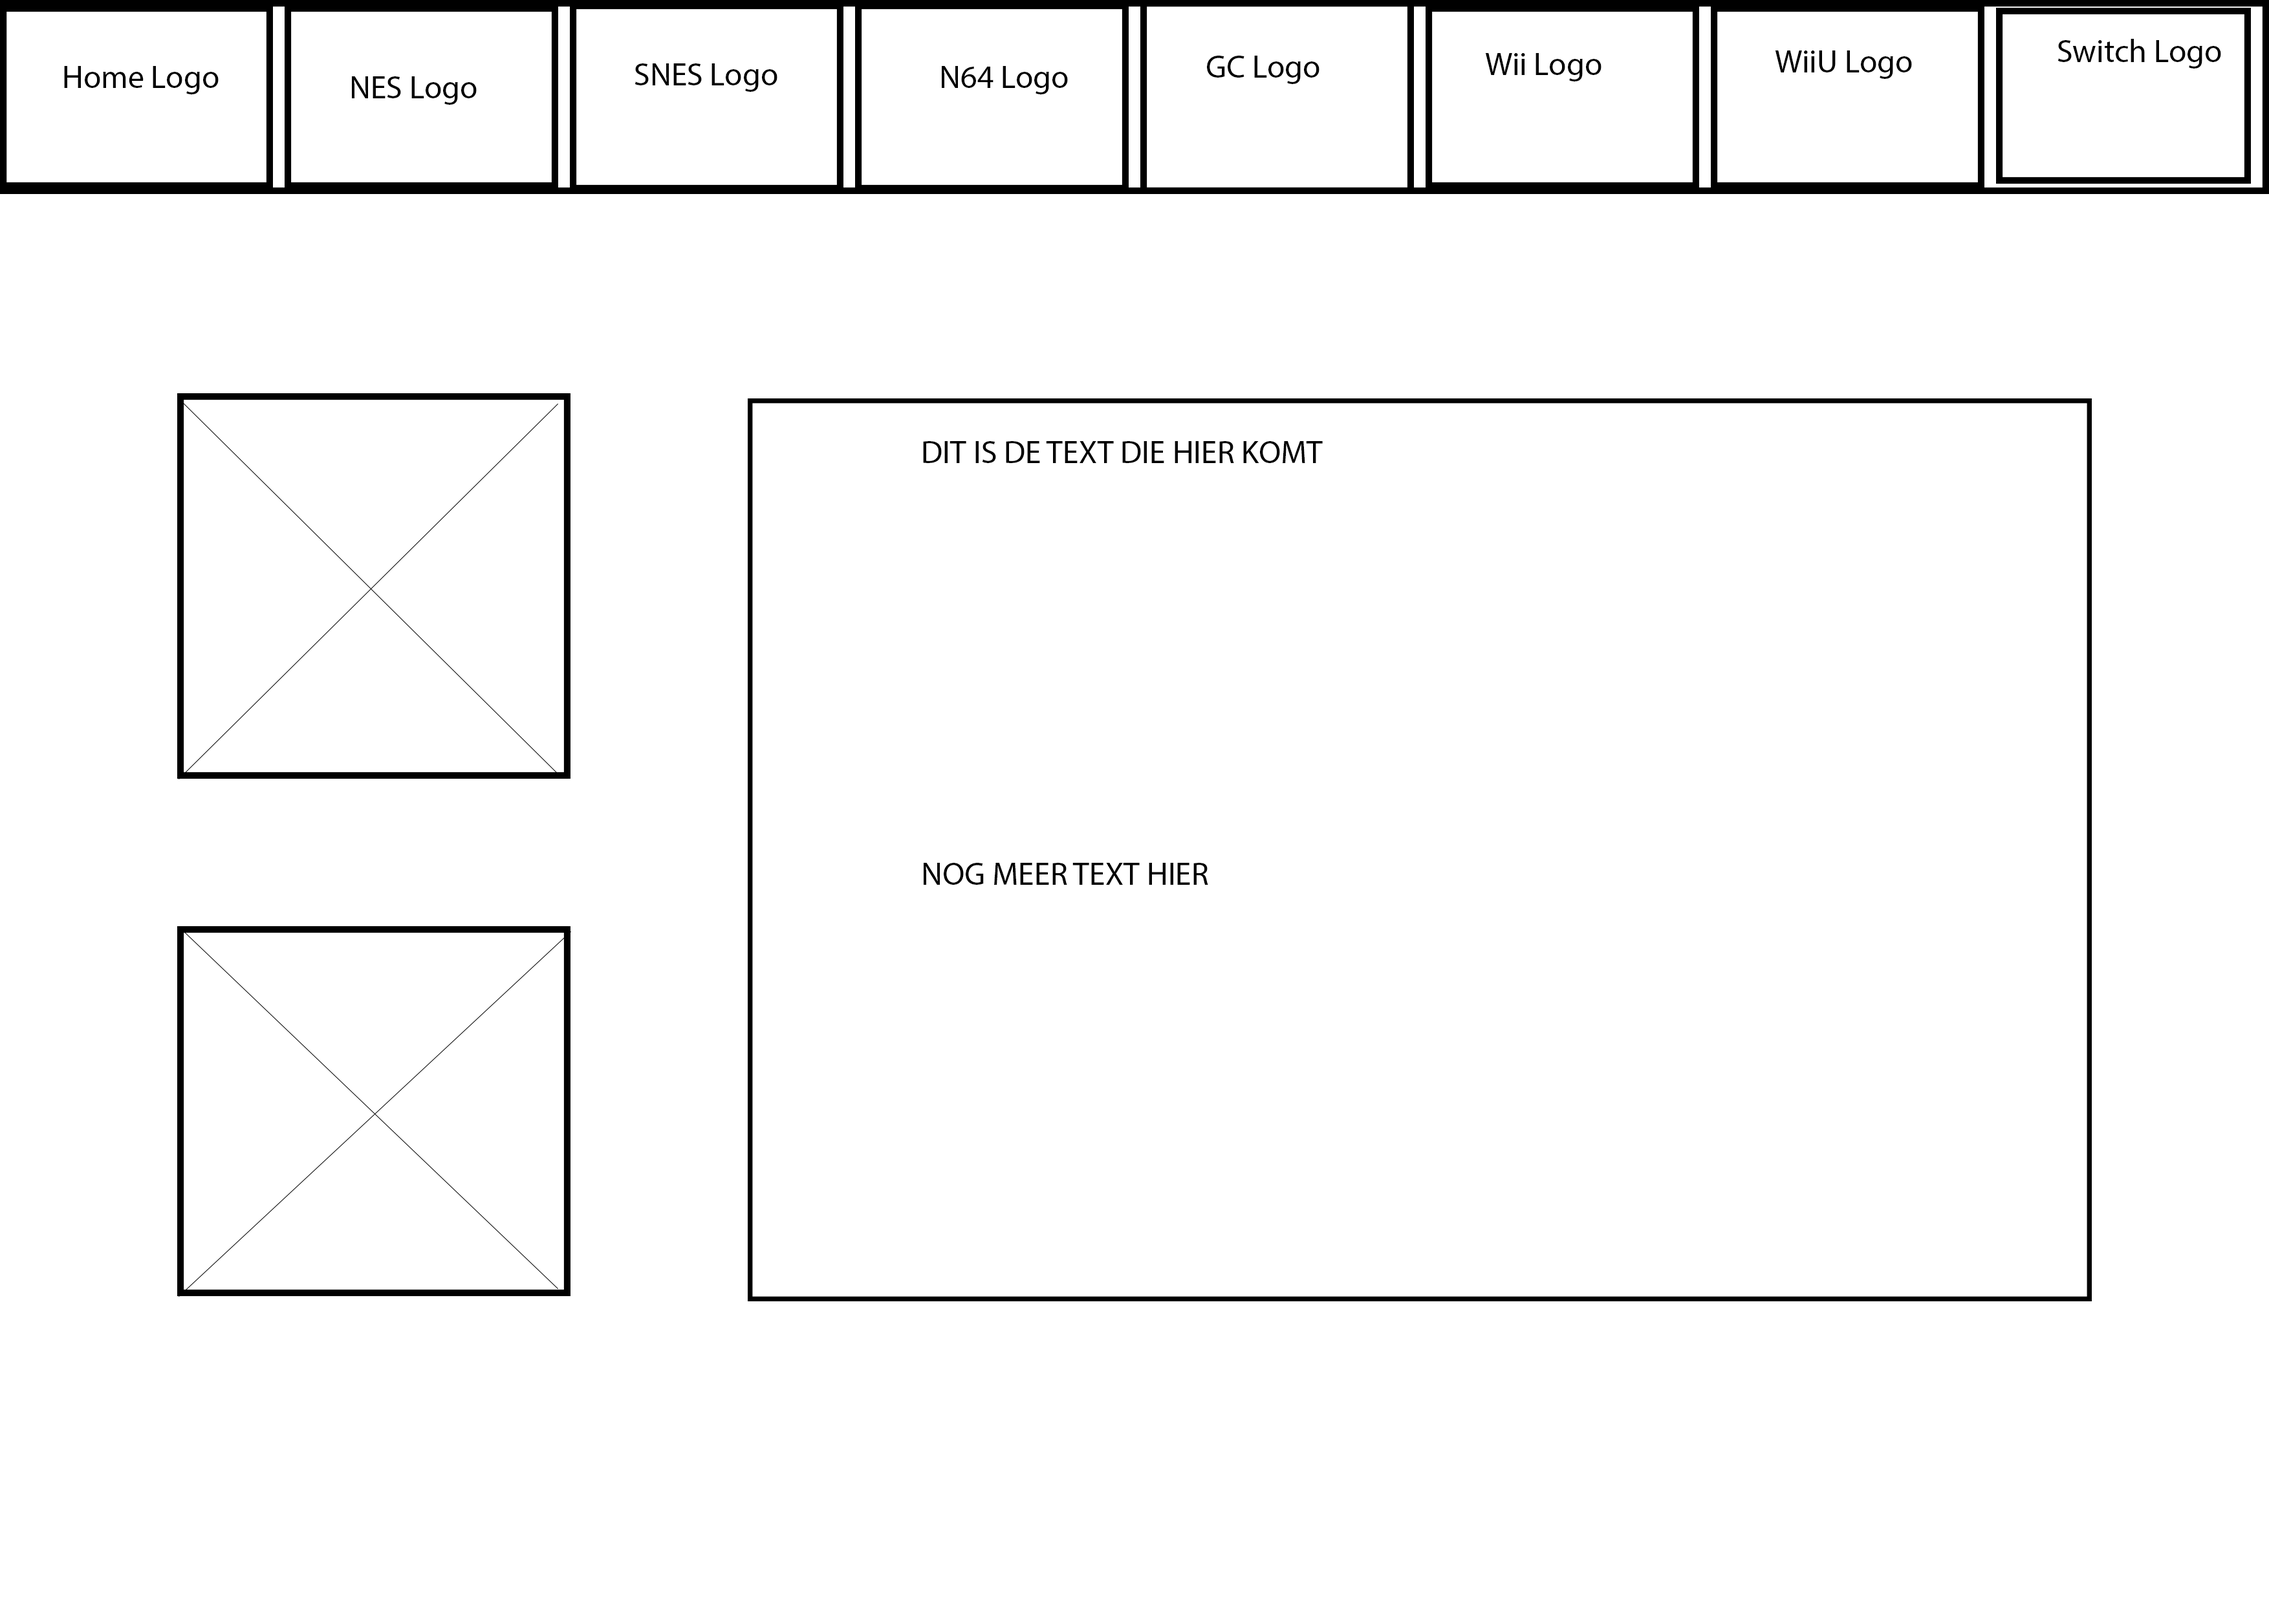
<style>
.page{position:relative;width:2269px;height:1604px;background:#ffffff}
.page>*{position:absolute;margin:0}
.t1{font:7.8px "MyriadPro-Regular";color:#000000}
</style>
<div class="page">
<p class="t1" style="left:2057px;top:39px;width:164px;height:30px">Switch Logo</p>
<p class="t1" style="left:1485px;top:53px;width:116px;height:28px">Wii Logo</p>
<p class="t1" style="left:1774px;top:50px;width:138px;height:29px">WiiU Logo</p>
<p class="t1" style="left:64px;top:66px;width:155px;height:28px">Home Logo</p>
<p class="t1" style="left:634px;top:63px;width:143px;height:29px">SNES Logo</p>
<p class="t1" style="left:942px;top:66px;width:126px;height:28px">N64 Logo</p>
<p class="t1" style="left:1207px;top:56px;width:112px;height:28px">GC Logo</p>
<p class="t1" style="left:352px;top:76px;width:125px;height:29px">NES Logo</p>
<p class="t1" style="left:923px;top:441px;width:399px;height:22px">DIT IS DE TEXT DIE HIER KOMT</p>
<p class="t1" style="left:923px;top:863px;width:285px;height:22px">NOG MEER TEXT HIER</p>
</div>
